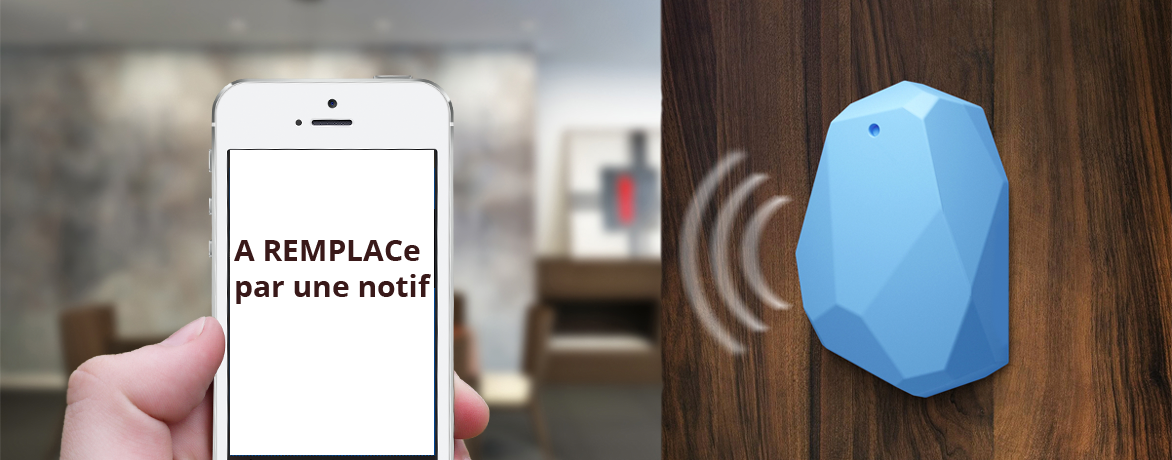
<style>
.page{position:relative;width:1172px;height:460px}
.page>*{position:absolute;margin:0}
.t1{font:30px "OpenSans-Bold";color:#391919}
</style>
<div class="page">
<p class="t1" style="left:234px;top:240px;width:197px;height:64px">A REMPLACe<br>par une notif</p>
</div>
